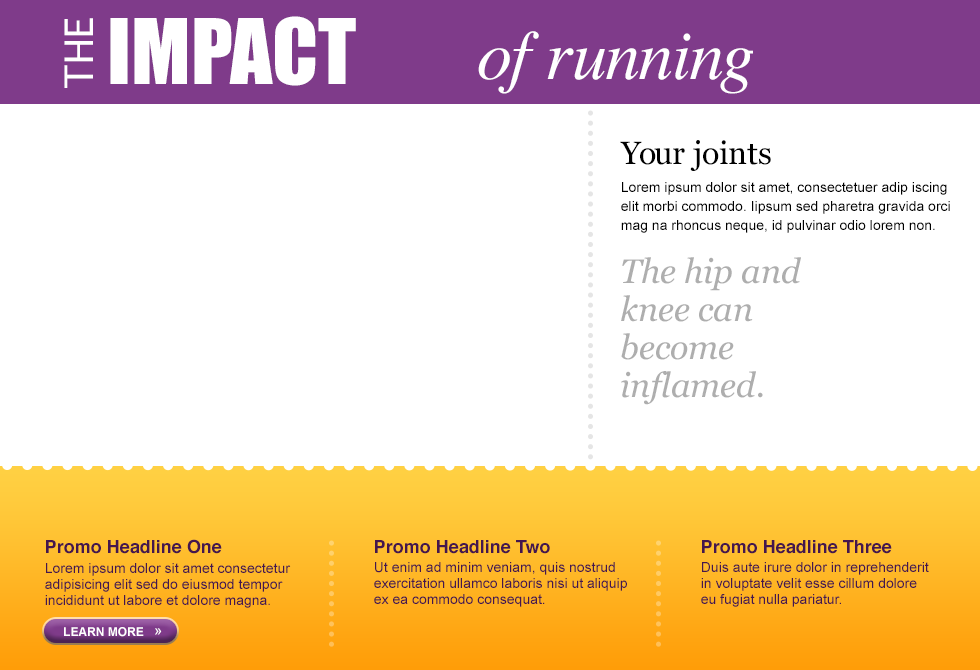
<style>
.page{position:relative;width:980px;height:670px;background:#ffffff}
.page>*{position:absolute;margin:0}
.t1{font:83.4px "Impact";color:#ffffff}
.t2{font:37.5px "Geneva";color:#ffffff}
.t3{font:70px "Times-Italic";letter-spacing:-0.025em;color:#ffffff}
.t4{font:70px "Times-Italic";letter-spacing:-0.045em;color:#ffffff}
.t5{font:70px "Times-Italic";letter-spacing:-0.065em;color:#ffffff}
.t6{font:14px/19px "ArialMT";color:#000000}
.t7{font:32px/18px "Georgia";letter-spacing:-0.06em;color:#000000}
.t8{font:32px/18px "Georgia";letter-spacing:-0.04em;color:#000000}
.t9{font:32px/18px "Georgia";letter-spacing:-0.02em;color:#000000}
.t10{font:32px/18px "Georgia";color:#000000}
.t11{font:14px/18px "ArialMT";color:#000000}
.t12{font:34px/38px "Georgia-Italic";color:#aeaeae}
.t13{font:14px/16px "ArialMT";color:#45174d}
.t14{font:18px/18px "Helvetica-Bold";color:#45174d}
.t15{font:14px/10px "ArialMT";color:#45174d}
.t16{font:14px/9px "ArialMT";color:#45174d}
.t17{font:12px "Arial-BoldMT";color:#ffffff}
.t18{font:14px "ArialMT";color:#ffffff}
</style>
<div class="page">
<p class="t1" style="left:110px;top:16px;width:246px;height:70px">IMPACT</p>
<p class="t2" style="left:64px;top:18px;width:29px;height:70px;rotate:-90deg">THE</p>
<p class="t3" style="left:478px;top:31px;width:275px;height:63px"><span class="t4">o</span><span class="t5">f </span>runni<span class="t5">n</span>g</p>
<p class="t6" style="left:620px;top:140px;width:330px;height:93px"><span class="t7">Y</span><span class="t8">o</span><span class="t9">u</span><span class="t10">r j</span><span class="t9">o</span><span class="t10">ints<br></span><span class="t11">Lorem ipsum dolor sit amet, consectetuer adip iscing </span>elit morbi commodo. Iipsum sed pharetra gravida orci mag na rhoncus neque, id pulvinar odio lorem non.</p>
<p class="t12" style="left:621px;top:257px;width:180px;height:148px">The hip and knee can become inflamed.</p>
<p class="t13" style="left:45px;top:539px;width:246px;height:69px"><span class="t14">Promo Headline One<br></span><span class="t15">Lorem ipsum dolor sit amet consectetur </span>adipisicing elit sed do eiusmod tempor incididunt ut labore et dolore magna.</p>
<p class="t13" style="left:374px;top:540px;width:253px;height:67px"><span class="t14">Promo Headline Two<br></span><span class="t16">Ut enim ad minim veniam, quis nostrud </span>exercitation ullamco laboris nisi ut aliquip ex ea commodo consequat.</p>
<p class="t13" style="left:701px;top:540px;width:228px;height:67px"><span class="t14">Promo Headline Three<br></span><span class="t16">Duis aute irure dolor in reprehenderit in </span>voluptate velit esse cillum dolore eu fugiat nulla pariatur.</p>
<p class="t17" style="left:64px;top:627px;width:98px;height:10px">LEARN MORE   <span class="t18">»</span></p>
</div>
